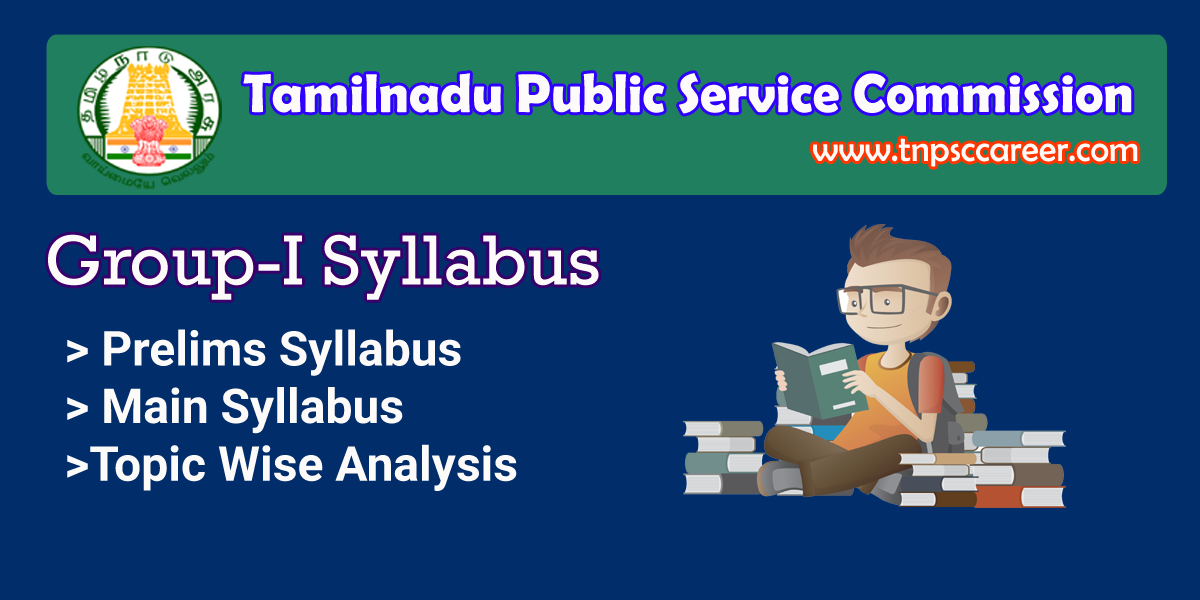
<style>
.page{position:relative;width:1200px;height:600px;background:#012d6a}
.page>*{position:absolute;margin:0}
.t1{font:55px "BerlinSansFBDemi-Bold";color:#fdfafa}
.t2{font:36px "BerlinSansFB-Reg";color:#fdfafa}
.t3{font:72px "Rockwell";color:#fdfafa}
.t4{font:48px "Roboto-Bold";color:#fdfafa}
</style>
<div class="page">
<p class="t1" style="left:243px;top:73px;width:889px;height:41px">Tamilnadu Public Service Commission</p>
<p class="t2" style="left:813px;top:138px;width:325px;height:29px">www.tnpsccareer.com</p>
<p class="t3" style="left:48px;top:234px;width:551px;height:66px">Group-I Syllabus</p>
<p class="t4" style="left:67px;top:329px;width:450px;height:162px">&gt; Prelims Syllabus<br>&gt; Main Syllabus<br>&gt;Topic Wise Analysis</p>
</div>
